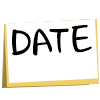
<style>
.page{position:relative;width:100px;height:100px;background:#ffffff}
.page>*{position:absolute;margin:0}
.t1{font:45px "DXSeNB-KSCpc-EUC-H";color:#000000}
</style>
<div class="page">
<p class="t1" style="left:12px;top:25px;width:80px;height:31px;rotate:-3deg">DATE</p>
</div>
